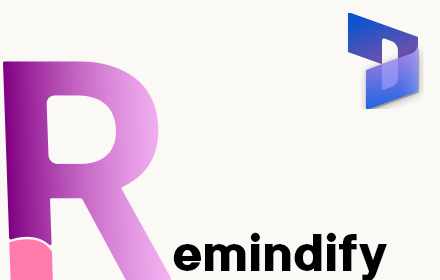
<style>
.page{position:relative;width:440px;height:280px;background:#faf9f6}
.page>*{position:absolute;margin:0}
.t1{font:50px "Sublima-ExtraBold";color:#000000}
</style>
<div class="page">
<p class="t1" style="left:173px;top:232px;width:214px;height:49px">emindify</p>
</div>
